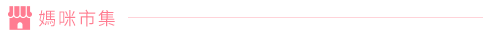
<style>
.page{position:relative;width:483px;height:32px;background:#ffffff}
.page>*{position:absolute;margin:0}
.t1{font:18px "NotoSansCJKtc-DemiLight";letter-spacing:0.1em;color:#ff7c91}
</style>
<div class="page">
<p class="t1" style="left:39px;top:9px;width:76px;height:18px">媽咪市集</p>
</div>
